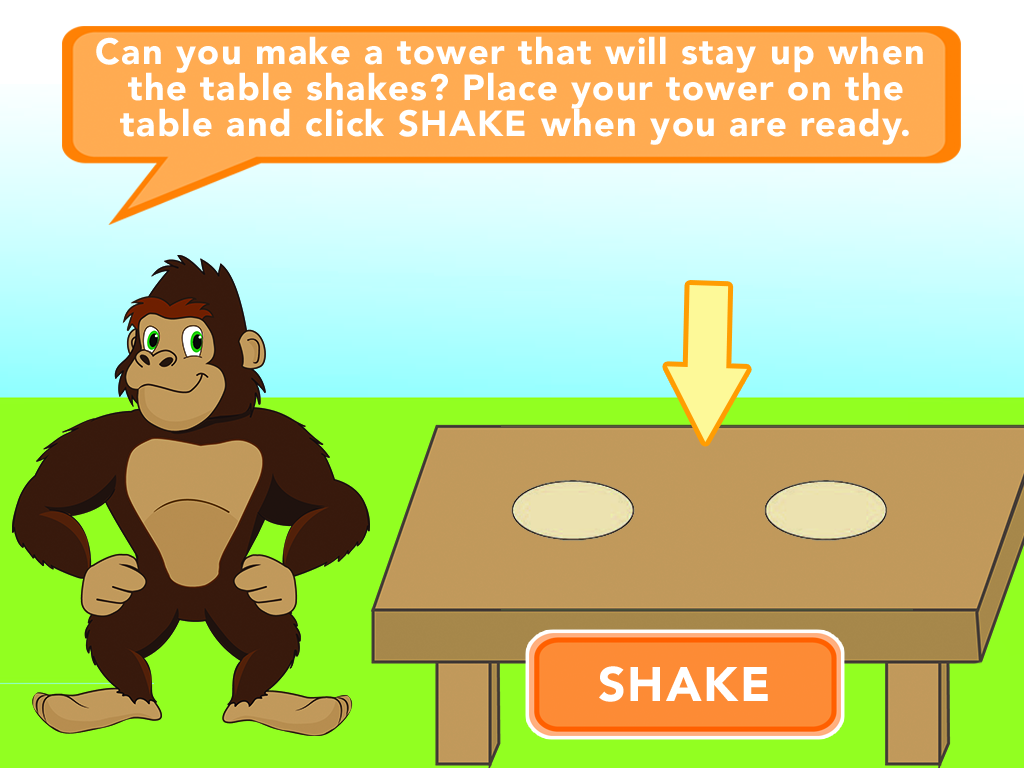
<style>
.page{position:relative;width:1024px;height:768px}
.page>*{position:absolute;margin:0}
.t1{font:36px/36px "Avenir-Black";letter-spacing:0.04em;color:#ffffff}
.t2{font:48px "Avenir-Black";letter-spacing:0.04em;color:#ffffff}
</style>
<div class="page">
<p class="t1" style="left:96px;top:36px;width:827px;height:109px;text-align:center">Can you make a tower that will stay up when <br>the table shakes? Place your tower on the<br>table and click SHAKE when you are ready.</p>
<p class="t2" style="left:599px;top:666px;width:169px;height:36px">SHAKE</p>
</div>
